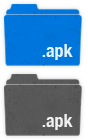
<style>
.page{position:relative;width:88px;height:140px}
.page>*{position:absolute;margin:0}
.t1{font:18px "HelveticaNeue-CondensedBold";color:#e6f1fb}
.t2{font:18px "HelveticaNeue-CondensedBold";color:#ffffff}
</style>
<div class="page">
<p class="t1" style="left:42px;top:44px;width:31px;height:16px">.apk</p>
<p class="t2" style="left:42px;top:114px;width:31px;height:16px;opacity:0.9">.apk</p>
</div>
